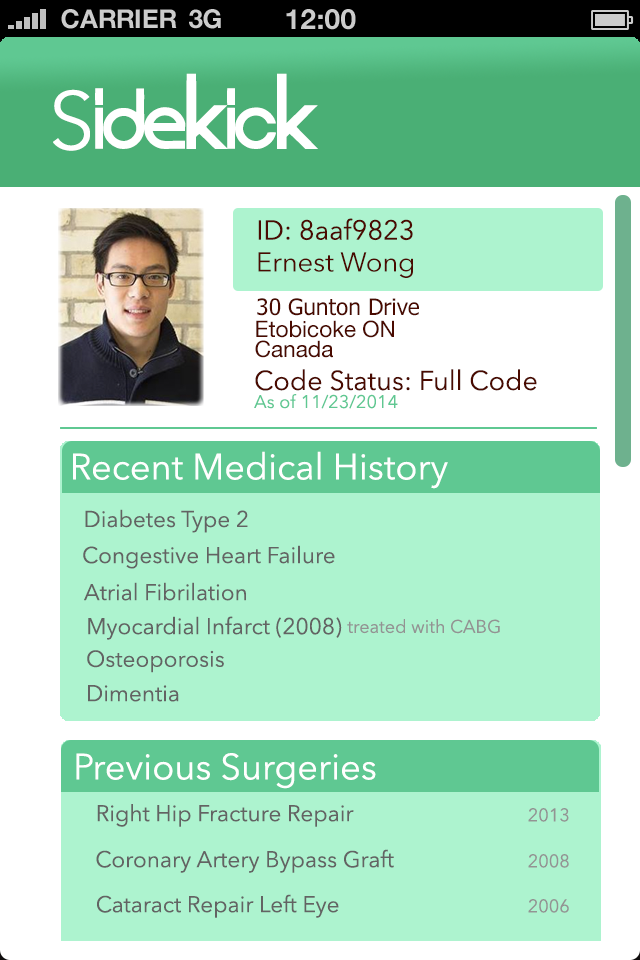
<style>
.page{position:relative;width:640px;height:960px;background:#adf3cf}
.page>*{position:absolute;margin:0}
.t1{font:81.5px "Evolution";color:#ffffff}
.t2{font:81.5px "AvenirNext-Regular";color:#ffffff}
.t3{font:27.2px "AvenirNext-Regular";color:#4a0a00}
.t4{font:22.6px "Tahoma";color:#4a0a00}
.t5{font:22.6px "HelveticaNeue";color:#4a0a00}
.t6{font:18.1px "AvenirNext-Regular";color:#5fc892}
.t7{font:36.2px "AvenirNext-Regular";color:#ffffff}
.t8{font:22.6px "AvenirNext-Regular";color:#636363}
.t9{font:18.1px "AvenirNext-Regular";color:#939393}
</style>
<div class="page">
<p class="t1" style="left:53px;top:73px;width:265px;height:78px"><span class="t2">S</span>idekick</p>
<p class="t3" style="left:258px;top:218px;width:155px;height:23px">ID: 8aaf9823</p>
<p class="t3" style="left:258px;top:252px;width:155px;height:26px">Ernest Wong</p>
<p class="t4" style="left:257px;top:298px;width:162px;height:18px">30 Gunton Drive</p>
<p class="t5" style="left:256px;top:320px;width:138px;height:18px">Etobicoke ON</p>
<p class="t5" style="left:255px;top:340px;width:78px;height:18px">Canada</p>
<p class="t3" style="left:255px;top:369px;width:282px;height:22px">Code Status: Full Code</p>
<p class="t6" style="left:254px;top:394px;width:144px;height:15px">As of 11/23/2014</p>
<p class="t7" style="left:73px;top:451px;width:375px;height:38px">Recent Medical History</p>
<p class="t8" style="left:85px;top:509px;width:163px;height:24px">Diabetes Type 2</p>
<p class="t8" style="left:83px;top:545px;width:252px;height:24px">Congestive Heart Failure</p>
<p class="t8" style="left:84px;top:582px;width:162px;height:19px">Atrial Fibrilation</p>
<p class="t8" style="left:88px;top:616px;width:254px;height:24px">Myocardial Infarct (2008)</p>
<p class="t9" style="left:347px;top:619px;width:153px;height:15px">treated with CABG</p>
<p class="t8" style="left:87px;top:650px;width:137px;height:23px">Osteoporosis</p>
<p class="t8" style="left:88px;top:685px;width:91px;height:17px">Dimentia</p>
<p class="t7" style="left:76px;top:753px;width:300px;height:36px">Previous Surgeries</p>
<p class="t8" style="left:97px;top:804px;width:257px;height:23px">Right Hip Fracture Repair</p>
<p class="t9" style="left:528px;top:808px;width:41px;height:14px">2013</p>
<p class="t8" style="left:96px;top:849px;width:298px;height:24px">Coronary Artery Bypass Graft</p>
<p class="t9" style="left:528px;top:854px;width:41px;height:14px">2008</p>
<p class="t8" style="left:97px;top:894px;width:242px;height:24px">Cataract Repair Left Eye</p>
<p class="t9" style="left:528px;top:899px;width:41px;height:14px">2006</p>
</div>
